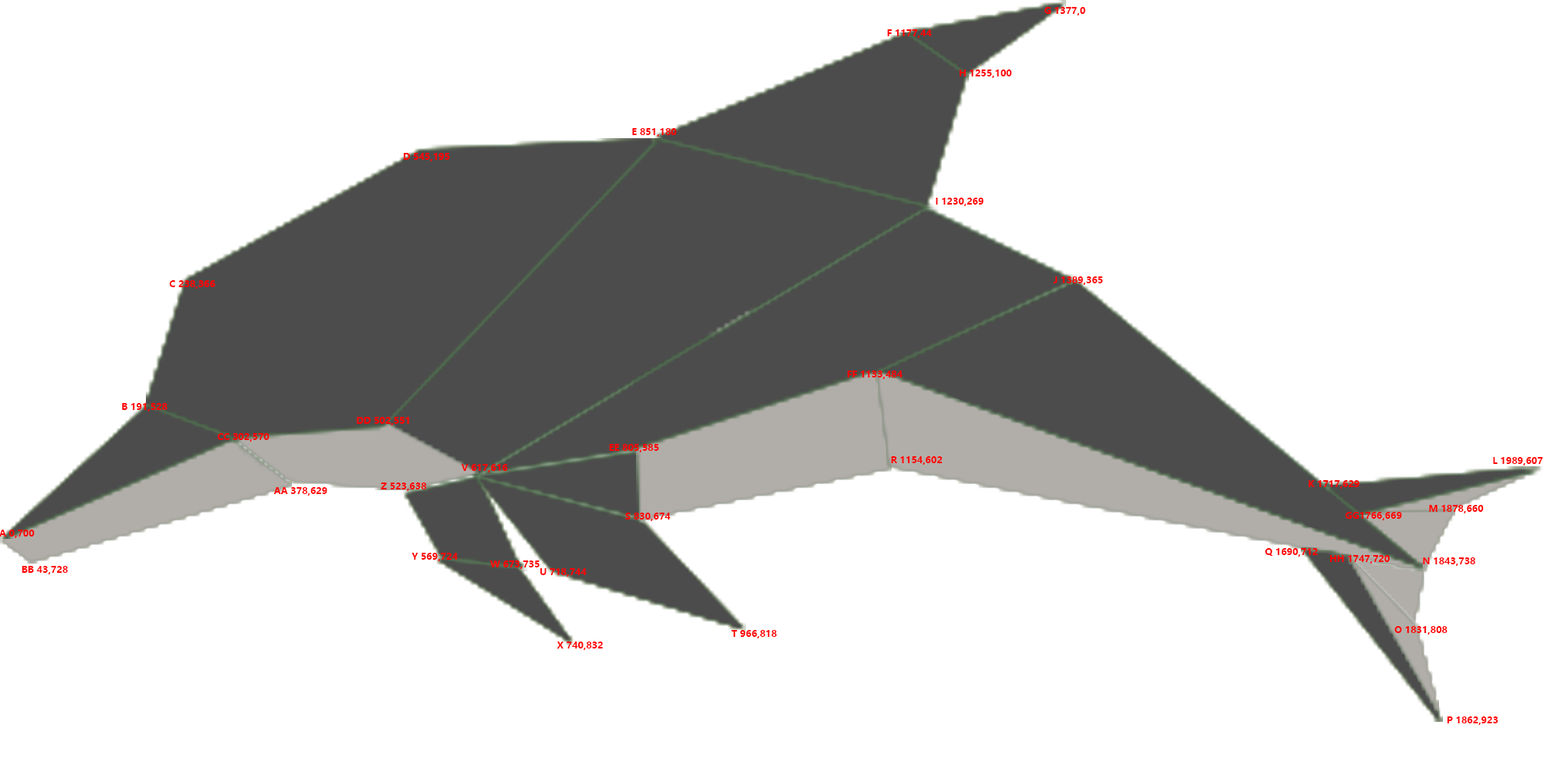
<style>
.page{position:relative;width:1544px;height:772px;background:#ffffff}
.page>*{position:absolute;margin:0}
.t1{font:9.3px "MicrosoftYaHei-Bold";color:#ff0000}
</style>
<div class="page">
<p class="t1" style="left:1045px;top:7px;width:41px;height:8px">G 1377,0</p>
<p class="t1" style="left:887px;top:29px;width:45px;height:9px">F 1177,44</p>
<p class="t1" style="left:960px;top:69px;width:52px;height:9px">H 1255,100</p>
<p class="t1" style="left:632px;top:128px;width:45px;height:9px">E 851,180</p>
<p class="t1" style="left:403px;top:153px;width:47px;height:8px">D 545,195</p>
<p class="t1" style="left:936px;top:198px;width:48px;height:8px">I 1230,269</p>
<p class="t1" style="left:169px;top:280px;width:46px;height:9px">C 238,366</p>
<p class="t1" style="left:1053px;top:276px;width:50px;height:9px">J 1389,365</p>
<p class="t1" style="left:847px;top:371px;width:56px;height:8px">FF 1133,484</p>
<p class="t1" style="left:122px;top:403px;width:46px;height:9px">B 191,528</p>
<p class="t1" style="left:357px;top:417px;width:52px;height:8px">DD 502,551</p>
<p class="t1" style="left:218px;top:433px;width:51px;height:9px">CC 302,570</p>
<p class="t1" style="left:609px;top:444px;width:50px;height:8px">EE 805,585</p>
<p class="t1" style="left:891px;top:456px;width:52px;height:9px">R 1154,602</p>
<p class="t1" style="left:1493px;top:457px;width:51px;height:9px">L 1989,607</p>
<p class="t1" style="left:461px;top:464px;width:47px;height:9px">V 617,616</p>
<p class="t1" style="left:381px;top:483px;width:46px;height:8px">Z 523,638</p>
<p class="t1" style="left:1309px;top:480px;width:51px;height:9px">K 1717,629</p>
<p class="t1" style="left:273px;top:487px;width:54px;height:9px">AA 378,629</p>
<p class="t1" style="left:1429px;top:505px;width:55px;height:8px">M 1878,660</p>
<p class="t1" style="left:625px;top:513px;width:46px;height:8px">S 830,674</p>
<p class="t1" style="left:1345px;top:512px;width:57px;height:8px">GG1766,669</p>
<p class="t1" style="left:0px;top:530px;width:35px;height:8px">A 0,700</p>
<p class="t1" style="left:412px;top:553px;width:46px;height:8px">Y 569,724</p>
<p class="t1" style="left:1265px;top:548px;width:53px;height:9px">Q 1690,712</p>
<p class="t1" style="left:1330px;top:555px;width:61px;height:9px">HH 1747,720</p>
<p class="t1" style="left:1423px;top:557px;width:53px;height:9px">N 1843,738</p>
<p class="t1" style="left:22px;top:566px;width:46px;height:8px">BB 43,728</p>
<p class="t1" style="left:490px;top:561px;width:50px;height:8px">W 673,735</p>
<p class="t1" style="left:540px;top:568px;width:47px;height:9px">U 718,744</p>
<p class="t1" style="left:1395px;top:626px;width:53px;height:9px">O 1831,808</p>
<p class="t1" style="left:557px;top:642px;width:46px;height:8px">X 740,832</p>
<p class="t1" style="left:731px;top:630px;width:46px;height:9px">T 966,818</p>
<p class="t1" style="left:1447px;top:717px;width:52px;height:8px">P 1862,923</p>
</div>
